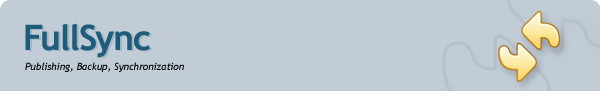
<style>
.page{position:relative;width:600px;height:91px;background:#c1ccd6}
.page>*{position:absolute;margin:0}
.t1{font:35px "TrebuchetMS-Bold";letter-spacing:-0.025em;color:#1f5c79}
.t2{font:35px "TrebuchetMS-Bold";letter-spacing:-0.05em;color:#1f5c79}
.t3{font:35px "TrebuchetMS-Bold";letter-spacing:-0.01em;color:#1f5c79}
.t4{font:35px "TrebuchetMS-Bold";letter-spacing:-0.025em}
.t5{font:35px "TrebuchetMS-Bold";letter-spacing:-0.05em}
.t6{font:35px "TrebuchetMS-Bold";letter-spacing:-0.01em}
.t7{font:10px "TrebuchetMS-Italic";letter-spacing:-0.01em;color:#000000}
</style>
<div class="page">
<p class="t1" style="left:25px;top:23px;width:125px;height:35px"><span class="t2">F</span>ul<span class="t3">l</span><span class="t2">S</span>ync</p>
<p class="t4" style="left:27px;top:24px;width:125px;height:35px"><span class="t5">F</span>ul<span class="t6">l</span><span class="t5">S</span>ync</p>
<p class="t7" style="left:25px;top:62px;width:159px;height:10px">Publishing, Backup, Synchronization</p>
</div>
